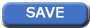
<style>
.page{position:relative;width:90px;height:28px;background:#4472c4}
.page>*{position:absolute;margin:0}
.t1{font:14px "Verdana";color:#ffffff;font-weight:bold}
</style>
<div class="page">
<p class="t1" style="left:26px;top:7px;width:38px;height:11px">SAVE</p>
</div>
